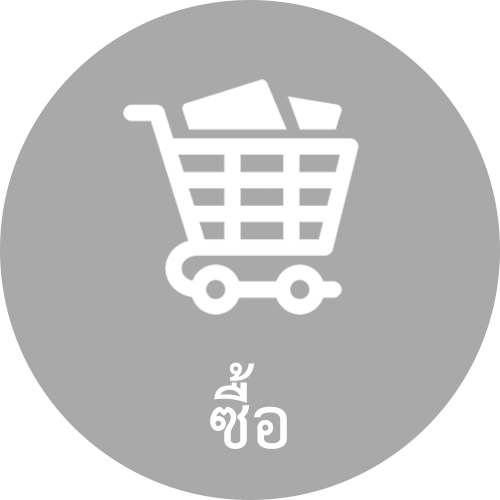
<style>
.page{position:relative;width:500px;height:500px;background:#a9a9a9}
.page>*{position:absolute;margin:0}
.t1{font:100.9px "THSarabunPSK-Bold";color:#ffffff}
</style>
<div class="page">
<p class="t1" style="left:210px;top:362px;width:77px;height:87px">ซื้อ</p>
</div>
